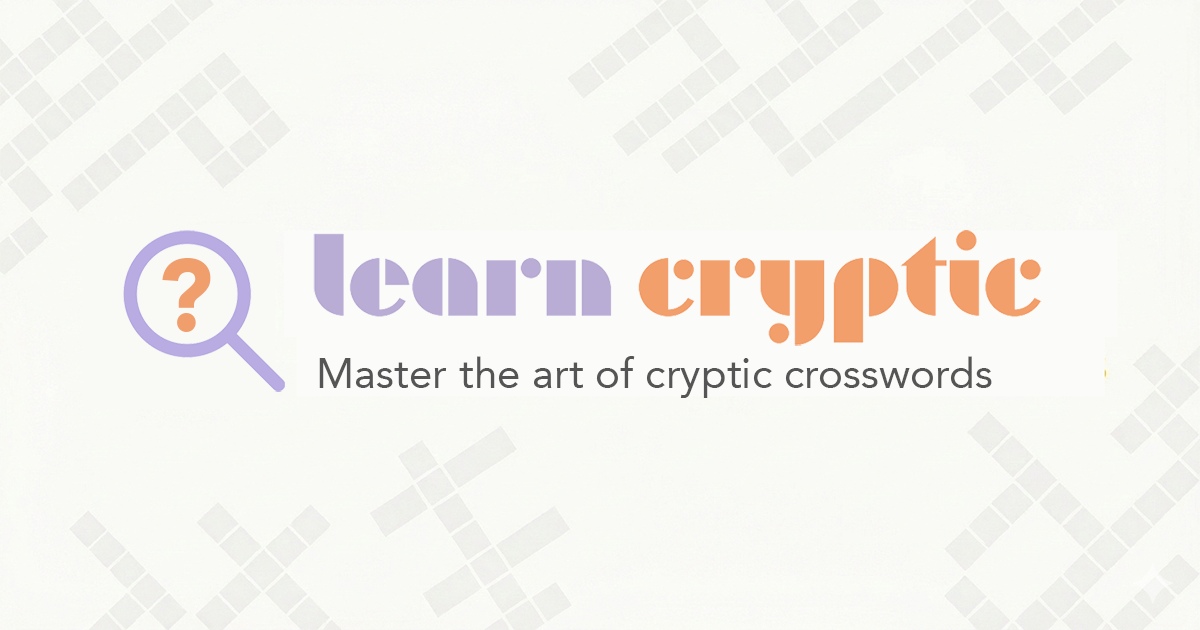
<style>
.page{position:relative;width:1200px;height:630px;background:#f9faf5}
.page>*{position:absolute;margin:0}
.t1{font:100.5px "Avenir-Black";color:#ef9e6c}
.t2{font:41.9px "Avenir-Roman";color:#555555}
</style>
<div class="page">
<p class="t1" style="left:162px;top:258px;width:49px;height:74px">?</p>
<p class="t2" style="left:319px;top:356px;width:673px;height:42px">Master the art of cryptic crosswords</p>
</div>
